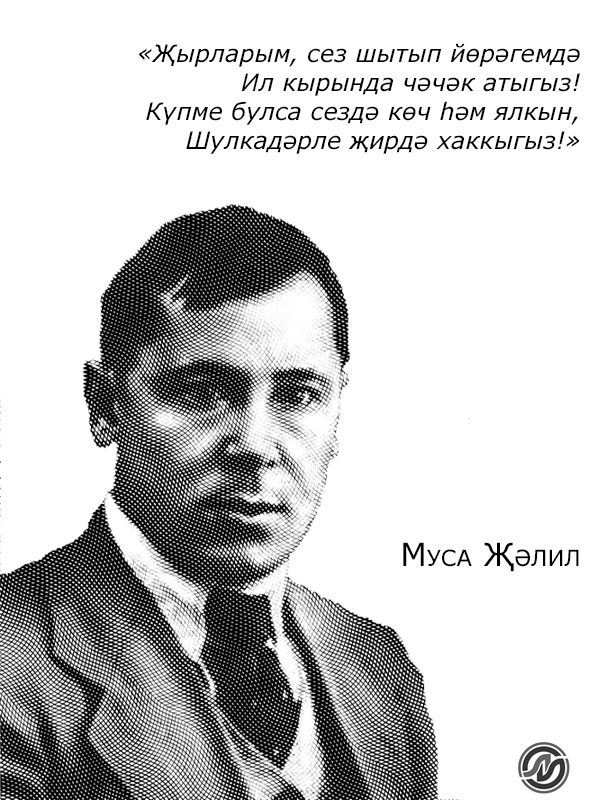
<style>
.page{position:relative;width:600px;height:800px;background:#ffffff}
.page>*{position:absolute;margin:0}
.t1{font:24px "Verdana-Italic";color:#000000}
.t2{font:32px "Verdana";color:#000000;font-variant:small-caps}
</style>
<div class="page">
<p class="t1" style="left:139px;top:43px;width:441px;height:111px;text-align:right">«Җырларым, сез шытып йөрәгемдә<br>Ил кырында чәчәк атыгыз!<br>Күпме булса сездә көч һәм ялкын,<br>Шулкадәрле җирдә хаккыгыз!»</p>
<p class="t2" style="left:403px;top:542px;width:176px;height:30px">Муса Җәлил</p>
</div>
